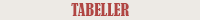
<style>
.page{position:relative;width:200px;height:20px;background:#edeae5}
.page>*{position:absolute;margin:0}
.t1{font:16px "BernardMT-Condensed";color:#b14542}
</style>
<div class="page">
<p class="t1" style="left:71px;top:3px;width:58px;height:13px">TABELLER</p>
</div>
